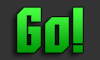
<style>
.page{position:relative;width:100px;height:60px;background:#333333}
.page>*{position:absolute;margin:0}
.t1{font:63.9px "Whitestone-Bold"}
</style>
<div class="page">
<p class="t1" style="left:17px;top:7px;width:66px;height:46px">Go!</p>
</div>
